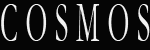
<style>
.page{position:relative;width:150px;height:50px;background:#050505}
.page>*{position:absolute;margin:0}
.t1{font:60.6px "Garamond";letter-spacing:0.27em;color:#f9f2f3;text-transform:uppercase;scale:0.46 1}
</style>
<div class="page">
<p class="t1" style="left:1px;top:4px;width:149px;height:37px">COSMOS</p>
</div>
